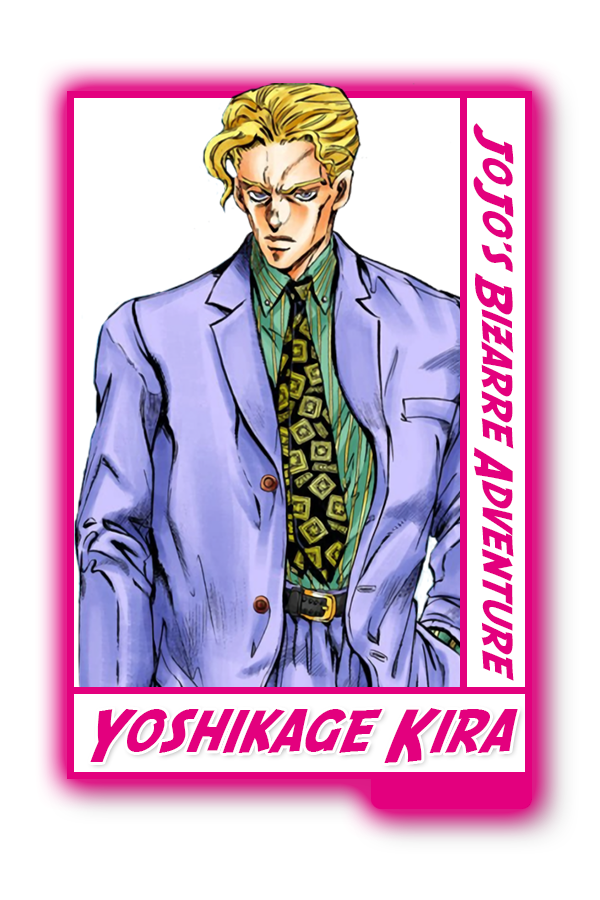
<style>
.page{position:relative;width:600px;height:900px;background:#ffffff}
.page>*{position:absolute;margin:0}
.t1{font:42.4px "SFFedora";color:#e3007e}
.t2{font:60.3px "SFFedora";color:#e3007e}
</style>
<div class="page">
<p class="t1" style="left:473px;top:123px;width:41px;height:558px;rotate:90deg">JoJo's Bizarre Adventure</p>
<p class="t2" style="left:90px;top:708px;width:428px;height:55px">Yoshikage Kira</p>
</div>
